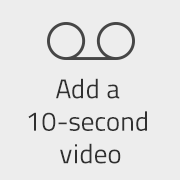
<style>
.page{position:relative;width:180px;height:180px;background:#ededed}
.page>*{position:absolute;margin:0}
.t1{font:27.1px "Titillium-Regular";color:#303030}
</style>
<div class="page">
<p class="t1" style="left:28px;top:78px;width:119px;height:86px;text-align:center">Add a <br>10-second <br>video</p>
</div>
